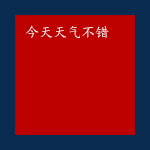
<style>
.page{position:relative;width:150px;height:150px;background:#bd0000}
.page>*{position:absolute;margin:0}
.t1{font:14px "¿¬Ìå";color:#ffffff}
</style>
<div class="page">
<p class="t1" style="left:25px;top:25px;width:84px;height:13px">今天天气不错</p>
</div>
